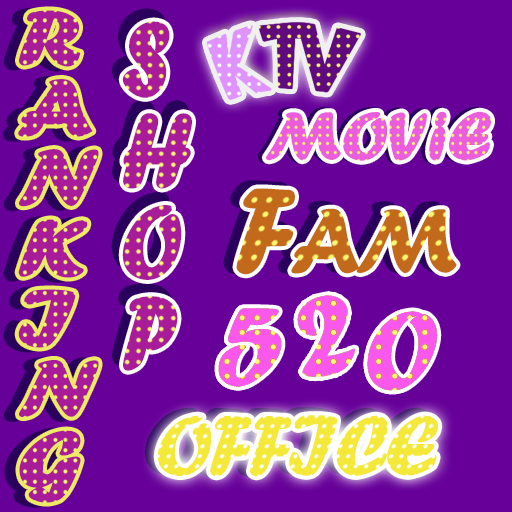
<style>
.page{position:relative;width:512px;height:512px;background:#660099}
.page>*{position:absolute;margin:0}
.t1{font:81.4px/70.3px "ForteMT";color:#a81c99;font-weight:bold;scale:1.23 1}
.t2{font:68.9px "ForteMT";color:#ec5cdd;font-weight:bold}
.t3{font:95.3px "ForteMT";letter-spacing:-0.05em;color:#c2691b}
.t4{font:126.3px "ForteMT";letter-spacing:-0.05em;color:#c2691b}
.t5{font:88.5px "ForteMT";letter-spacing:-0.05em;color:#f4e93b}
</style>
<div class="page">
<p class="t1" style="left:18px;top:10px;width:81px;height:493px">R<br>A<br>N<br>K<br>I<br>N<br>G</p>
<p class="t2" style="left:265px;top:111px;width:226px;height:50px">MOViE</p>
<p class="t3" style="left:236px;top:188px;width:221px;height:87px"><span class="t4">F</span>AM</p>
<p class="t5" style="left:157px;top:415px;width:282px;height:62px">OFFICE</p>
</div>
